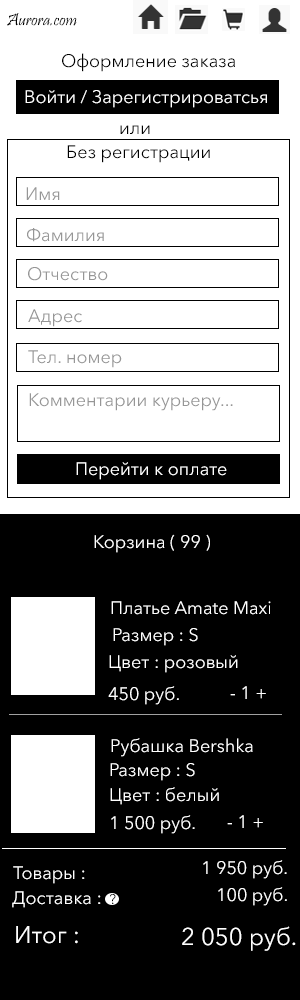
<style>
.page{position:relative;width:300px;height:1000px;background:#ffffff}
.page>*{position:absolute;margin:0}
.t1{font:18px "Pristina-Regular";color:#000000}
.t2{font:18px "AvenirNextCyr-Regular";color:#000000}
.t3{font:18px "AvenirNextCyr-Regular";color:#ffffff}
.t4{font:18px "AvenirNextCyr-Regular";color:#969696}
.t5{font:14px "AvenirNextCyr-Regular";color:#000000}
.t6{font:24px "AvenirNextCyr-Regular";color:#ffffff}
</style>
<div class="page">
<p class="t1" style="left:7px;top:13px;width:70px;height:13px">Aurora.com</p>
<p class="t2" style="left:62px;top:53px;width:173px;height:19px">Оформление заказа</p>
<p class="t3" style="left:25px;top:90px;width:242px;height:18px">Войти / Зарегистрироватсья</p>
<p class="t2" style="left:120px;top:125px;width:30px;height:9px">или</p>
<p class="t2" style="left:67px;top:145px;width:143px;height:18px">Без регистрации</p>
<p class="t4" style="left:26px;top:187px;width:34px;height:13px">Имя</p>
<p class="t4" style="left:27px;top:228px;width:77px;height:14px">Фамилия</p>
<p class="t4" style="left:28px;top:267px;width:80px;height:14px">Отчество</p>
<p class="t4" style="left:28px;top:309px;width:54px;height:18px">Адрес</p>
<p class="t4" style="left:28px;top:350px;width:94px;height:18px">Тел. номер</p>
<p class="t4" style="left:29px;top:393px;width:204px;height:18px">Комментарии курьеру...</p>
<p class="t3" style="left:76px;top:462px;width:151px;height:18px">Перейти к оплате</p>
<p class="t3" style="left:94px;top:534px;width:116px;height:19px">Корзина ( 99 )</p>
<p class="t3" style="left:111px;top:601px;width:160px;height:14px">Платье Amate Maxi</p>
<p class="t3" style="left:113px;top:628px;width:85px;height:18px">Размер : S</p>
<p class="t3" style="left:109px;top:655px;width:129px;height:18px">Цвет : розовый</p>
<p class="t3" style="left:108px;top:686px;width:71px;height:19px">450 руб.</p>
<p class="t3" style="left:230px;top:686px;width:36px;height:13px">- 1 +</p>
<p class="t3" style="left:111px;top:738px;width:142px;height:19px">Рубашка Bershka</p>
<p class="t3" style="left:110px;top:763px;width:85px;height:18px">Размер : S</p>
<p class="t3" style="left:110px;top:787px;width:109px;height:18px">Цвет : белый</p>
<p class="t3" style="left:111px;top:815px;width:84px;height:19px">1 500 руб.</p>
<p class="t3" style="left:227px;top:815px;width:36px;height:13px">- 1 +</p>
<p class="t3" style="left:13px;top:866px;width:72px;height:18px">Товары :</p>
<p class="t3" style="left:203px;top:860px;width:84px;height:19px">1 950 руб.</p>
<p class="t3" style="left:12px;top:891px;width:89px;height:17px">Доставка :</p>
<p class="t5" style="left:110px;top:894px;width:6px;height:10px">?</p>
<p class="t3" style="left:218px;top:887px;width:69px;height:19px">100 руб.</p>
<p class="t6" style="left:16px;top:926px;width:62px;height:18px">Итог :</p>
<p class="t6" style="left:182px;top:926px;width:114px;height:25px">2 050 руб.</p>
</div>
